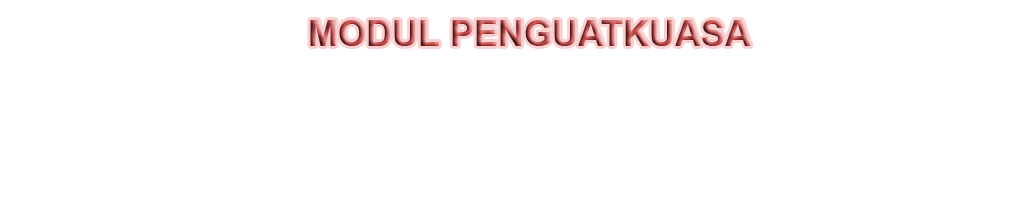
<style>
.page{position:relative;width:1028px;height:202px;background:#ffffff}
.page>*{position:absolute;margin:0}
.t1{font:36px "Arial-BoldMT"}
</style>
<div class="page">
<p class="t1" style="left:310px;top:20px;width:441px;height:26px">MODUL PENGUATKUASA</p>
</div>
